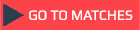
<style>
.page{position:relative;width:140px;height:30px;background:#fc4349}
.page>*{position:absolute;margin:0}
.t1{font:14px "Play";color:#ffffff}
</style>
<div class="page">
<p class="t1" style="left:29px;top:10px;width:104px;height:10px">GO TO MATCHES</p>
</div>
